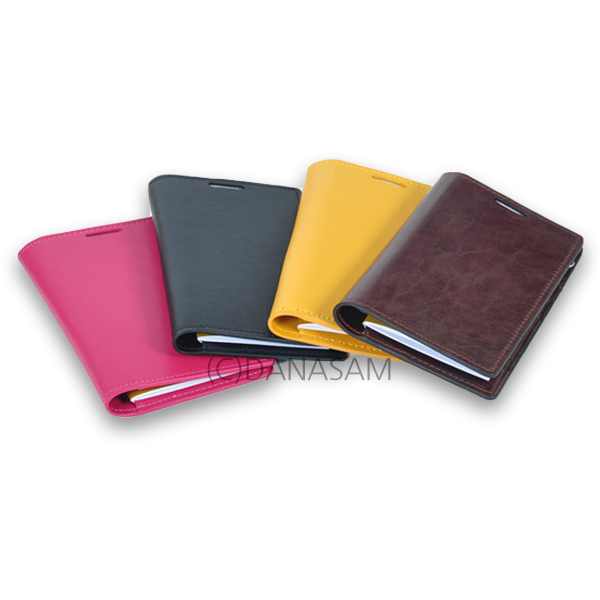
<style>
.page{position:relative;width:600px;height:600px;background:#ffffff}
.page>*{position:absolute;margin:0}
.t1{font:30px "NanumGothic";letter-spacing:-0.025em;text-transform:uppercase}
</style>
<div class="page">
<p class="t1" style="left:207px;top:355px;width:184px;height:30px">(c)DANASAM</p>
</div>
